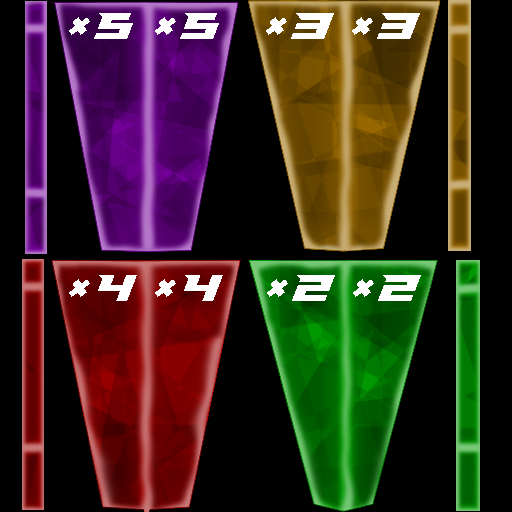
<style>
.page{position:relative;width:512px;height:512px;background:#000000}
.page>*{position:absolute;margin:0}
.t1{font:40px "Paladins";letter-spacing:0.12em;color:#ffffff}
</style>
<div class="page">
<p class="t1" style="left:69px;top:13px;width:64px;height:26px">×5</p>
<p class="t1" style="left:155px;top:13px;width:64px;height:26px">×5</p>
<p class="t1" style="left:266px;top:13px;width:68px;height:26px">×3</p>
<p class="t1" style="left:352px;top:13px;width:68px;height:26px">×3</p>
<p class="t1" style="left:69px;top:275px;width:68px;height:26px">×4</p>
<p class="t1" style="left:155px;top:275px;width:68px;height:26px">×4</p>
<p class="t1" style="left:267px;top:275px;width:68px;height:26px">×2</p>
<p class="t1" style="left:353px;top:275px;width:68px;height:26px">×2</p>
</div>
